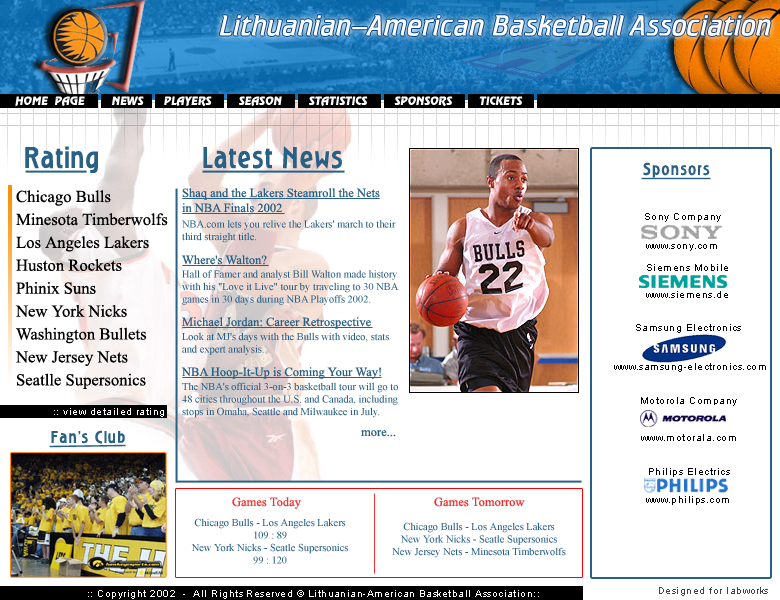
<style>
.page{position:relative;width:780px;height:600px;background:#ffffff}
.page>*{position:absolute;margin:0}
.t1{font:29.2px "Cricket-Light";color:#ffffff}
.t2{font:10.4px "AGRevueCyrItalic";color:#ffffff}
.t3{font:29.2px "DG_RoslynGothic";color:#286086}
.t4{font:16.7px "DG_RoslynGothic";letter-spacing:0.05em;color:#286086}
.t5{font:16.7px/22.9px "TimesNewRomanPSMT";color:#000000}
.t6{font:12.5px "TimesNewRomanPSMT";color:#286086}
.t7{font:10.4px "TimesNewRomanPSMT";color:#286086}
.t8{font:9.4px "ArialMT";letter-spacing:0.05em;color:#000000}
.t9{font:9.4px "ArialMT";letter-spacing:0.05em;color:#ffffff}
.t10{font:12.5px "TimesNewRomanPSMT";color:#fe2f2f}
.t11{font:12.5px "TimesNewRomanPSMT";color:#f42c2c}
.t12{font:9.4px "ArialMT";letter-spacing:0.05em;color:#424242}
</style>
<div class="page">
<p class="t1" style="left:220px;top:15px;width:551px;height:21px">Lithuanian-American Basketball Association</p>
<p class="t2" style="left:15px;top:96px;width:508px;height:11px">HOME PAGE    NEWS   PLAYERS    SEASON    STATISTICS    SPONSORS    TICKETS</p>
<p class="t3" style="left:25px;top:146px;width:73px;height:27px">Rating</p>
<p class="t3" style="left:203px;top:146px;width:139px;height:23px">Latest News</p>
<p class="t4" style="left:643px;top:162px;width:67px;height:16px">Sponsors</p>
<p class="t5" style="left:15px;top:190px;width:153px;height:199px">Chicago Bulls<br>Minesota Timberwolfs<br>Los Angeles Lakers<br>Huston Rockets<br>Phinix Suns<br>New York Nicks<br>Washington Bullets<br>New Jersey Nets<br>Seatlle Supersonics</p>
<p class="t6" style="left:182px;top:188px;width:198px;height:25px"><span class="t7"><br></span>Shaq and the Lakers Steamroll the Nets <br>in NBA Finals 2002</p>
<p class="t7" style="left:182px;top:220px;width:217px;height:198px">NBA.com lets you relive the Lakers' march to their <br>third straight title. <br><br><br>Hall of Famer and analyst Bill Walton made history <br>with his "Love it Live" tour by traveling to 30 NBA <br>games in 30 days during NBA Playoffs 2002. <br><br><br>Look at MJ's days with the Bulls with video, stats <br>and expert analysis. <br><br> <br>The NBA's official 3-on-3 basketball tour will go to <br>48 cities throughout the U.S. and Canada, including <br>stops in Omaha, Seattle and Milwaukee in July.</p>
<p class="t8" style="left:645px;top:213px;width:76px;height:9px">Sony Company</p>
<p class="t8" style="left:646px;top:244px;width:71px;height:7px">www.sony.com</p>
<p class="t6" style="left:182px;top:255px;width:85px;height:10px">Where's Walton?</p>
<p class="t8" style="left:647px;top:264px;width:81px;height:7px">Siemens Mobile</p>
<p class="t8" style="left:646px;top:291px;width:82px;height:7px">www.siemens.de</p>
<p class="t6" style="left:182px;top:317px;width:189px;height:12px">Michael Jordan: Career Retrospective</p>
<p class="t8" style="left:636px;top:324px;width:105px;height:9px">Samsung Electronics</p>
<p class="t8" style="left:614px;top:363px;width:152px;height:9px">www.samsung-electronics.com</p>
<p class="t6" style="left:181px;top:367px;width:200px;height:12px">NBA Hoop-It-Up is Coming Your Way!</p>
<p class="t8" style="left:641px;top:397px;width:96px;height:9px">Motorola Company</p>
<p class="t9" style="left:54px;top:408px;width:121px;height:9px">:: view detailed rating ::</p>
<p class="t4" style="left:51px;top:430px;width:74px;height:14px">Fan's Club</p>
<p class="t6" style="left:361px;top:430px;width:35px;height:7px">more...</p>
<p class="t8" style="left:641px;top:434px;width:95px;height:7px">www.motorala.com</p>
<p class="t8" style="left:649px;top:468px;width:81px;height:9px">Philips Electrics</p>
<p class="t10" style="left:232px;top:497px;width:69px;height:12px">Games Today</p>
<p class="t11" style="left:434px;top:497px;width:91px;height:10px">Games Tomorrow</p>
<p class="t8" style="left:646px;top:496px;width:83px;height:9px">www.philips.com</p>
<p class="t7" style="left:191px;top:518px;width:157px;height:46px;text-align:center">Chicago Bulls - Los Angeles Lakers<br>109 : 89<br>New York Nicks - Seatle Supersonics<br>99 : 120</p>
<p class="t7" style="left:392px;top:522px;width:174px;height:36px;text-align:center">Chicago Bulls - Los Angeles Lakers<br>New York Nicks - Seatle Supersonics<br>New Jersey Nets - Minesota Timberwolfs</p>
<p class="t9" style="left:88px;top:590px;width:451px;height:9px">:: Copyright 2002  -  All Rights Reserved © Lithuanian-American Basketball Association::</p>
<p class="t12" style="left:659px;top:587px;width:109px;height:9px">Designed for labworks</p>
</div>
